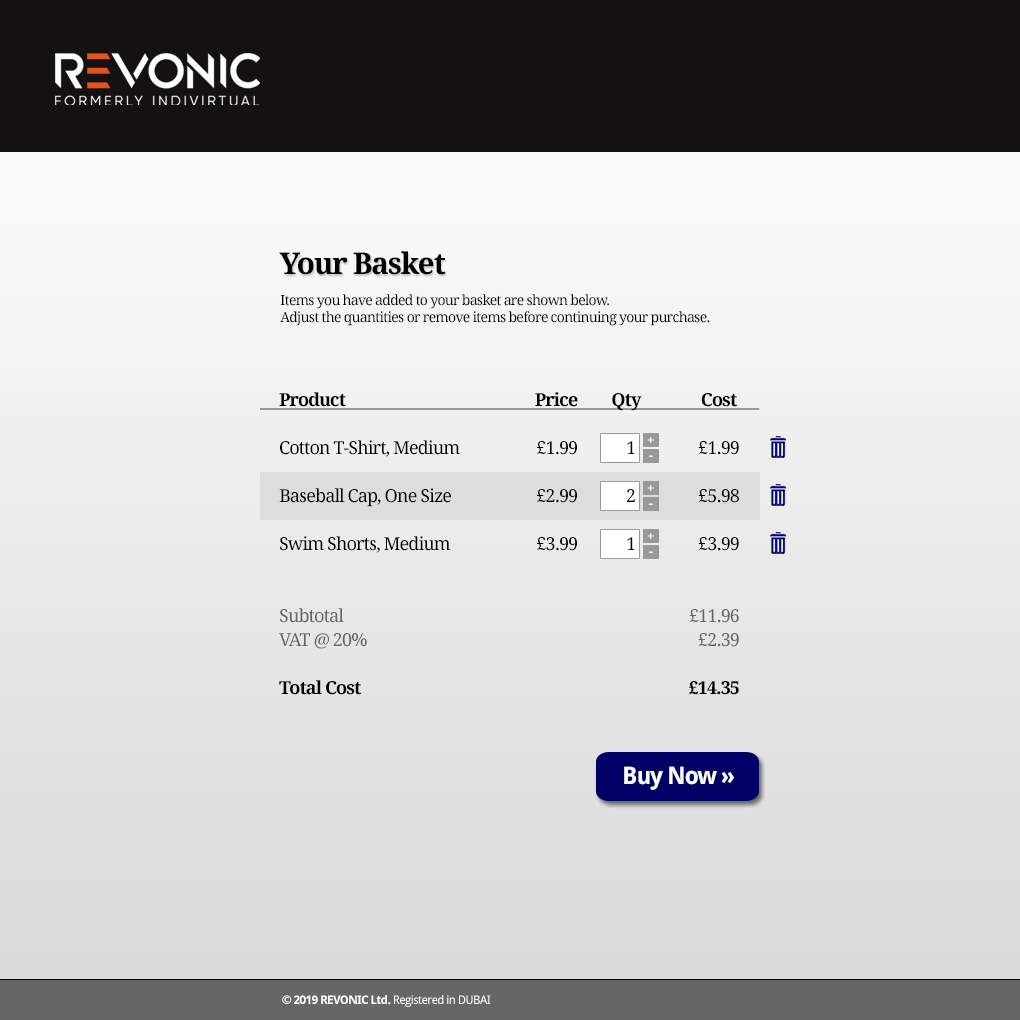
<style>
.page{position:relative;width:1020px;height:1020px}
.page>*{position:absolute;margin:0}
.t1{font:30px "DroidSerif-Bold";letter-spacing:-0.05em;color:#000000}
.t2{font:14px "DroidSerif";letter-spacing:-0.05em;color:#000000}
.t3{font:18px/48px "DroidSerif";letter-spacing:-0.05em;color:#000000}
.t4{font:18px/48px "DroidSerif-Bold";letter-spacing:-0.05em;color:#000000;text-decoration:underline}
.t5{font:18px/24px "DroidSerif";letter-spacing:-0.05em;color:#666666}
.t6{font:18px/48px "DroidSerif-Bold";letter-spacing:-0.05em;color:#000000}
.t7{font:14px "DroidSerif-Bold";letter-spacing:-0.05em;color:#ffffff}
.t8{font:18px "DroidSerif";letter-spacing:-0.05em;color:#000000}
.t9{font:24px "DroidSans-Bold";letter-spacing:-0.05em;color:#ffffff}
.t10{font:12px "DroidSans-Bold";letter-spacing:-0.05em;color:#ffffff}
.t11{font:12px "DroidSans";letter-spacing:-0.05em;color:#ffffff}
</style>
<div class="page">
<p class="t1" style="left:279px;top:251px;width:167px;height:24px">Your Basket</p>
<p class="t2" style="left:280px;top:294px;width:430px;height:32px">Items you have added to your basket are shown below.<br>Adjust the quantities or remove items before continuing your purchase.</p>
<p class="t3" style="left:260px;top:392px;width:500px;height:303px"><span class="t4">     Product            Price         Qty                Cost      <br></span>     Cotton T-Shirt, Medium <br>     Baseball Cap, One Size<br>     Swim Shorts, Medium<br><br><span class="t5">     Subtotal<br>     VAT @ 20%<br></span><span class="t6">     Total Cost</span></p>
<p class="t7" style="left:647px;top:437px;width:7px;height:6px">+</p>
<p class="t3" style="left:537px;top:441px;width:202px;height:254px;text-align:right">£1.99                                £1.99<br>£2.99                                £5.98<br>£3.99                                £3.99<br><br><span class="t5">£11.96<br>£2.39<br></span><span class="t6">£14.35</span></p>
<p class="t8" style="left:627px;top:441px;width:8px;height:13px">1</p>
<p class="t7" style="left:649px;top:455px;width:4px;height:2px">-</p>
<p class="t7" style="left:647px;top:485px;width:7px;height:6px">+</p>
<p class="t8" style="left:627px;top:489px;width:8px;height:13px">2</p>
<p class="t7" style="left:649px;top:503px;width:4px;height:2px">-</p>
<p class="t7" style="left:647px;top:533px;width:7px;height:6px">+</p>
<p class="t8" style="left:627px;top:537px;width:8px;height:13px">1</p>
<p class="t7" style="left:649px;top:551px;width:4px;height:2px">-</p>
<p class="t9" style="left:624px;top:766px;width:110px;height:24px">Buy Now »</p>
<p class="t10" style="left:282px;top:995px;width:209px;height:12px">© 2019 REVONIC Ltd. <span class="t11">Registered in DUBAI</span></p>
</div>
